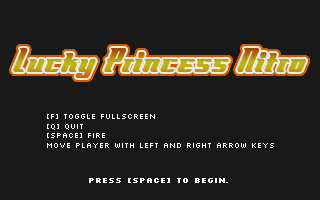
<style>
.page{position:relative;width:320px;height:200px;background:#191919}
.page>*{position:absolute;margin:0}
.t1{font:8px "Silkscreen";color:#ffffff}
.t2{font:8px "Silkscreen-Bold";color:#ffffff}
</style>
<div class="page">
<p class="t1" style="left:47px;top:114px;width:227px;height:34px">[F] toggle fullscreen<br>[Q] Quit<br>[Space] Fire<br>Move player with left and Right Arrow Keys</p>
<p class="t2" style="left:89px;top:178px;width:139px;height:5px">Press [SPACE] to Begin.</p>
</div>
